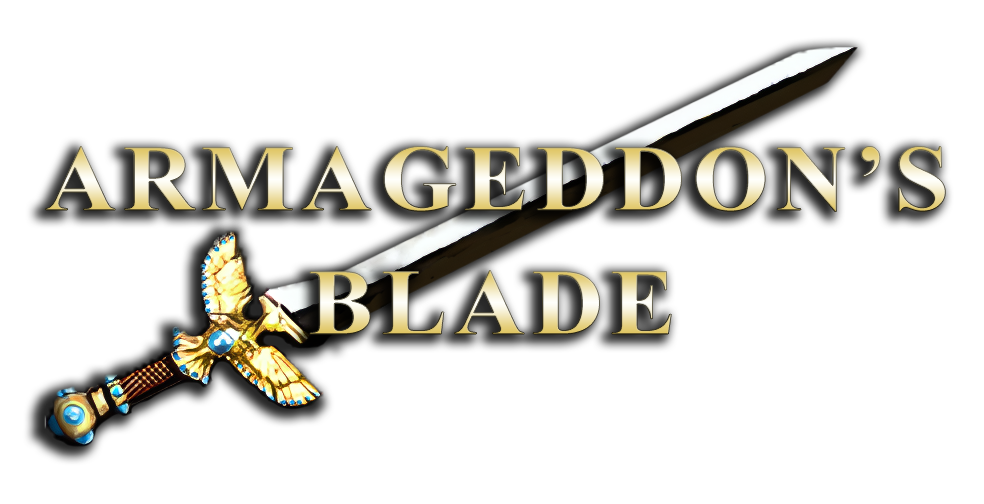
<style>
.page{position:relative;width:984px;height:504px;background:#ffffff}
.page>*{position:absolute;margin:0}
.t1{font:94px "TimesNewRomanPS-BoldMT";letter-spacing:0.07em;scale:1.05 1}
</style>
<div class="page">
<p class="t1" style="left:45px;top:146px;width:901px;height:66px">ARMAGEDDON’S</p>
<p class="t1" style="left:310px;top:270px;width:362px;height:64px">BLADE</p>
</div>
